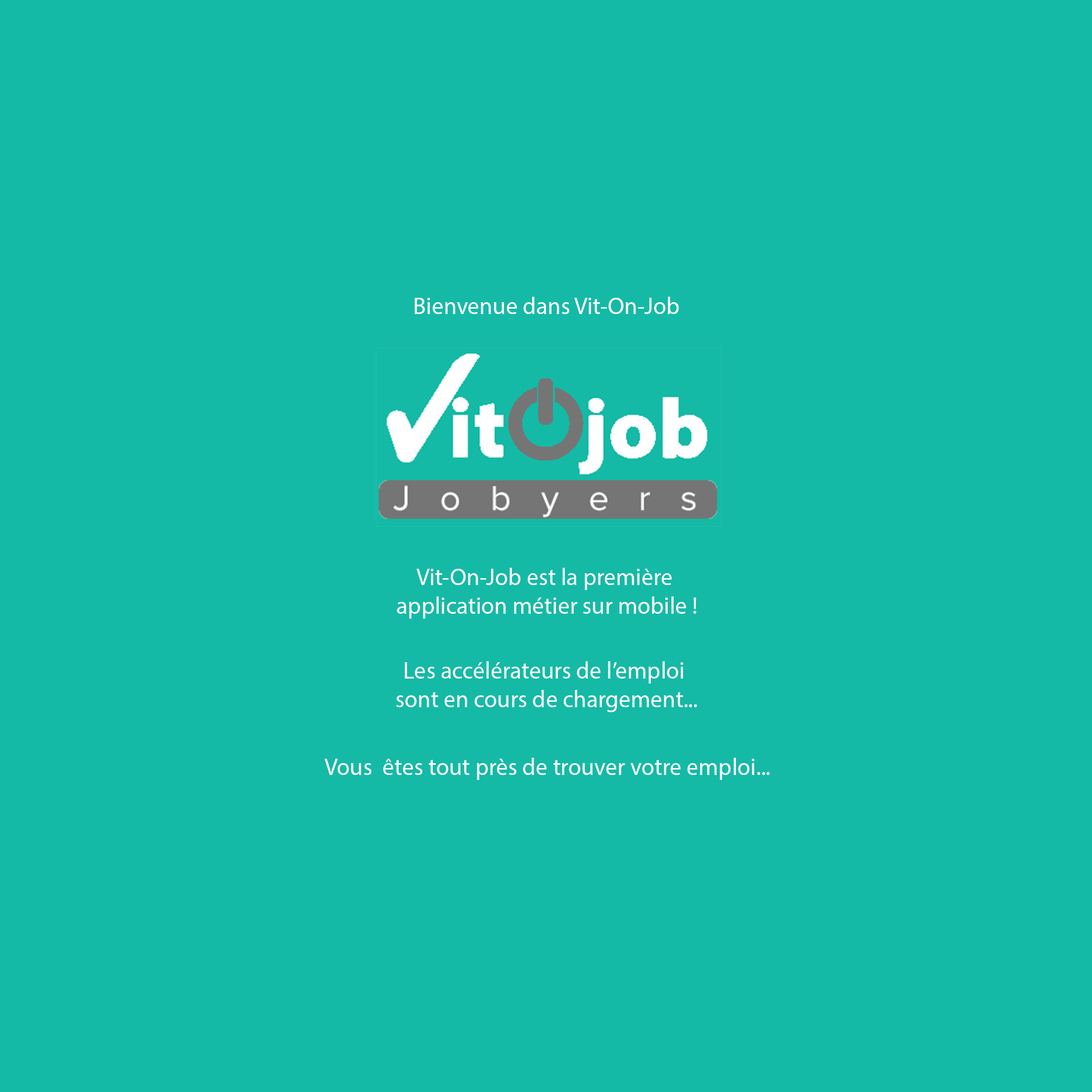
<style>
.page{position:relative;width:1092px;height:1092px;background:#14baa6}
.page>*{position:absolute;margin:0}
.t1{font:23.7px "MyriadPro-Regular";color:#fefdfd}
</style>
<div class="page">
<p class="t1" style="left:414px;top:297px;width:265px;height:17px">Bienvenue dans Vit-On-Job</p>
<p class="t1" style="left:397px;top:568px;width:299px;height:51px;text-align:center">Vit-On-Job est la première <br>application métier sur mobile !</p>
<p class="t1" style="left:396px;top:661px;width:301px;height:51px;text-align:center">Les accélérateurs de l’emploi <br>sont en cours de chargement...</p>
<p class="t1" style="left:324px;top:758px;width:446px;height:22px">Vous  êtes tout près de trouver votre emploi...</p>
</div>
